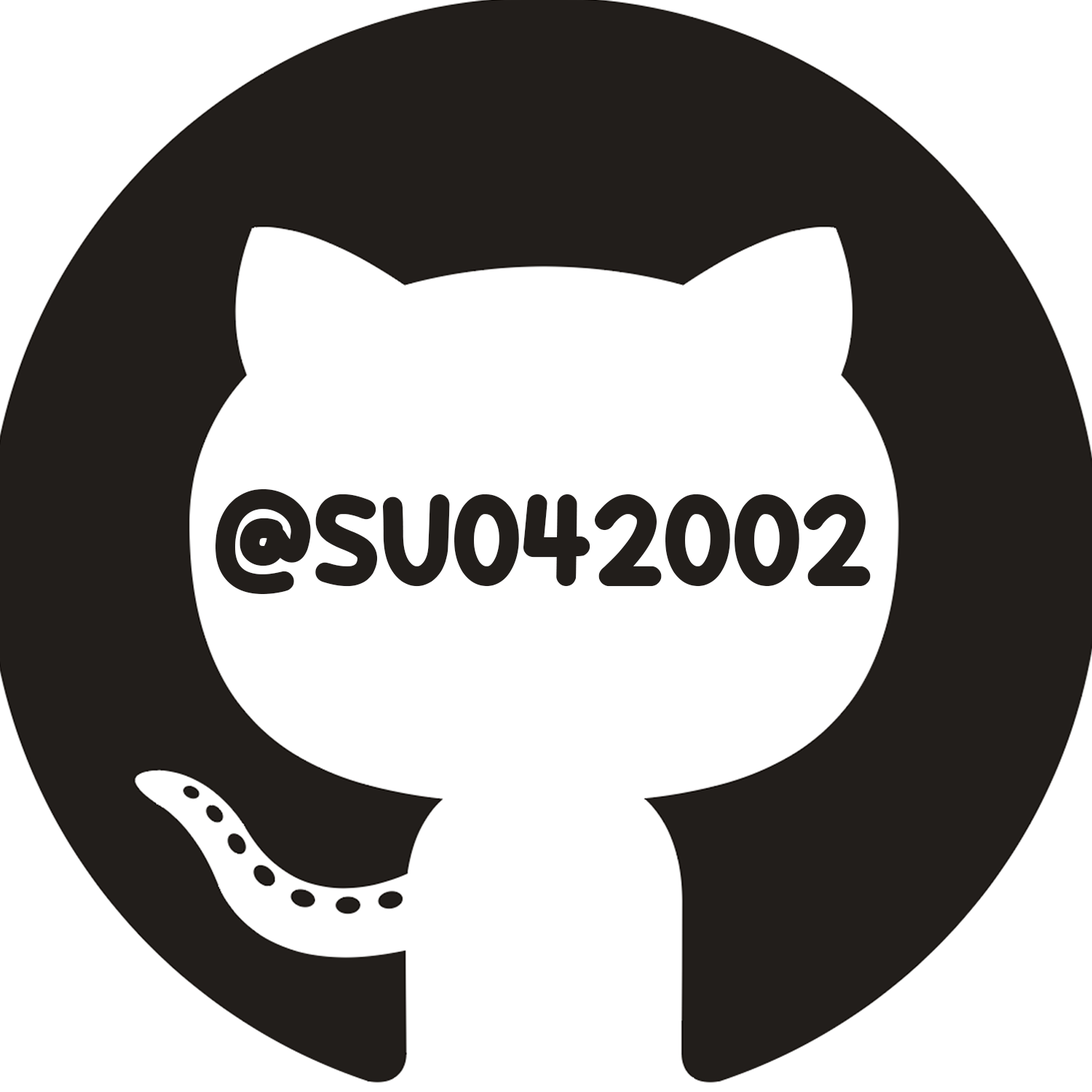
<style>
.page{position:relative;width:1092px;height:1092px;background:#ffffff}
.page>*{position:absolute;margin:0}
.t1{font:128px "CandyBeans";color:#221e1b}
</style>
<div class="page">
<p class="t1" style="left:215px;top:489px;width:656px;height:105px">@SU042002</p>
</div>
